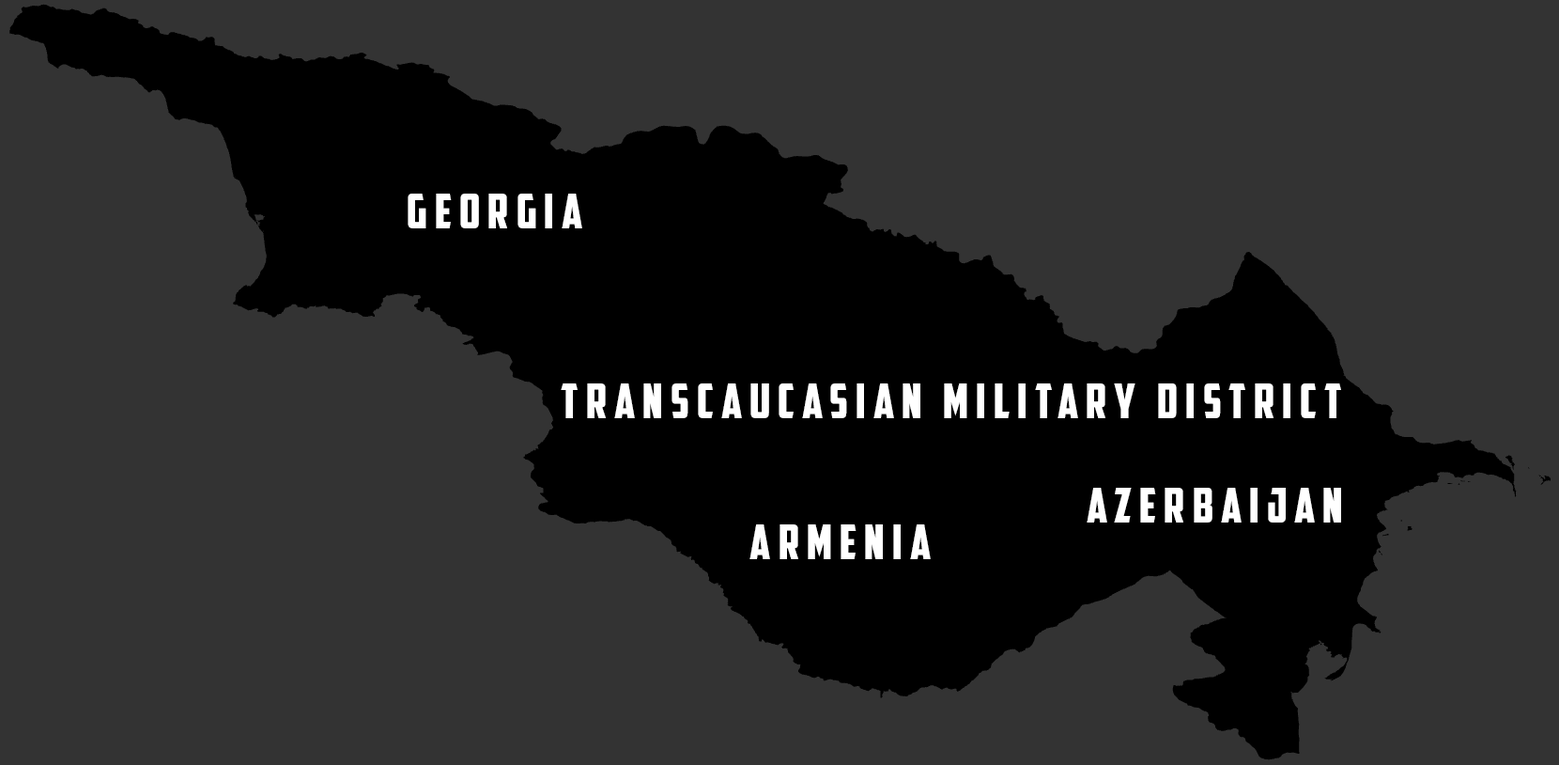
<style>
.page{position:relative;width:1559px;height:765px;background:#333333}
.page>*{position:absolute;margin:0}
.t1{font:47.9px "AmericanCaptain";letter-spacing:0.16em;color:#ffffff}
</style>
<div class="page">
<p class="t1" style="left:408px;top:194px;width:174px;height:34px">georgia</p>
<p class="t1" style="left:561px;top:383px;width:780px;height:35px">transcaucasian military district</p>
<p class="t1" style="left:1087px;top:488px;width:254px;height:34px">azerbaijan</p>
<p class="t1" style="left:750px;top:524px;width:181px;height:35px">armenia</p>
</div>
